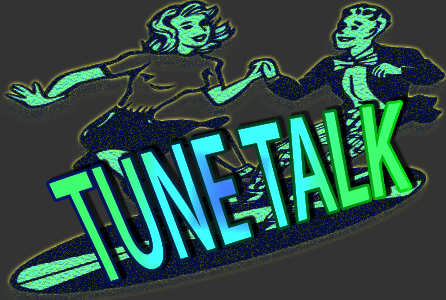
<style>
.page{position:relative;width:446px;height:300px;background:#333333}
.page>*{position:absolute;margin:0}
.t1{font:145.1px "MyriadPro-SemiboldIt";scale:0.51 1}
</style>
<div class="page">
<p class="t1" style="left:49px;top:102px;width:361px;height:180px;rotate:-15deg">TUNE TALK</p>
</div>
